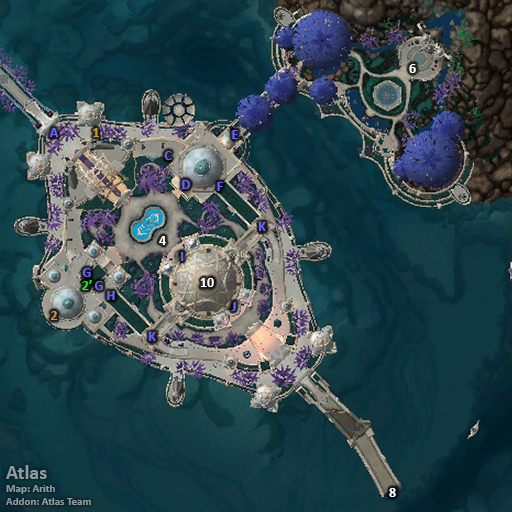
<style>
.page{position:relative;width:512px;height:512px}
.page>*{position:absolute;margin:0}
.t1{font:14px "Calibri-Bold";color:#ffffff}
.t2{font:14px "Calibri-Bold";color:#6666ff}
.t3{font:14px "Calibri-Bold";color:#cc9933}
.t4{font:14px "Calibri-Bold";color:#00ff00}
.t5{font:11px "Calibri-Bold";color:#909b9e}
.t6{font:20px "Calibri-Bold";color:#909b9e}
</style>
<div class="page">
<p class="t1" style="left:409px;top:64px;width:7px;height:9px">6</p>
<p class="t2" style="left:49px;top:128px;width:9px;height:9px">A</p>
<p class="t3" style="left:93px;top:128px;width:6px;height:9px">1</p>
<p class="t2" style="left:232px;top:130px;width:6px;height:9px">E</p>
<p class="t2" style="left:164px;top:151px;width:8px;height:9px">C</p>
<p class="t2" style="left:182px;top:180px;width:8px;height:9px">D</p>
<p class="t2" style="left:217px;top:182px;width:6px;height:9px">F</p>
<p class="t2" style="left:259px;top:222px;width:7px;height:9px">K</p>
<p class="t1" style="left:159px;top:236px;width:7px;height:9px">4</p>
<p class="t2" style="left:181px;top:252px;width:3px;height:9px">I</p>
<p class="t2" style="left:82px;top:268px;width:9px;height:9px">G</p>
<p class="t4" style="left:82px;top:280px;width:10px;height:10px">2’</p>
<p class="t2" style="left:94px;top:281px;width:9px;height:9px">G</p>
<p class="t1" style="left:200px;top:278px;width:14px;height:9px">10</p>
<p class="t2" style="left:107px;top:291px;width:8px;height:9px">H</p>
<p class="t2" style="left:231px;top:302px;width:5px;height:9px">J</p>
<p class="t3" style="left:51px;top:311px;width:7px;height:9px">2</p>
<p class="t2" style="left:149px;top:332px;width:7px;height:9px">K</p>
<p class="t5" style="left:6px;top:465px;width:85px;height:40px"><span class="t6">Atlas<br></span>Map: Arith<br>Addon: Atlas Team</p>
<p class="t1" style="left:389px;top:488px;width:7px;height:9px">8</p>
</div>
